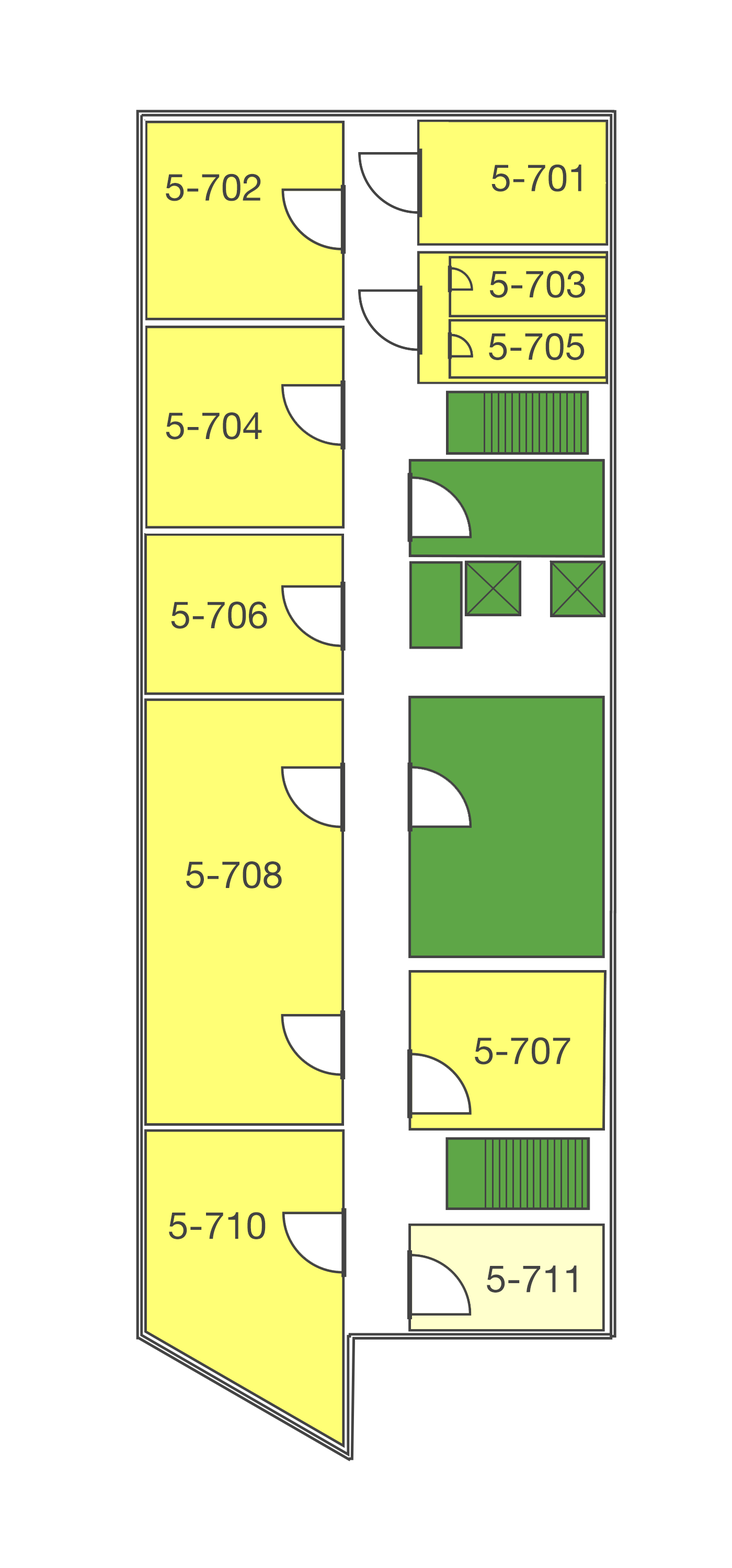
<style>
.page{position:relative;width:732px;height:1568px;background:#ffffff}
.page>*{position:absolute;margin:0}
.t1{font:37.6px "HelveticaNeue";color:#434343}
</style>
<div class="page">
<p class="t1" style="left:166px;top:174px;width:95px;height:27px">5-702</p>
<p class="t1" style="left:491px;top:164px;width:90px;height:28px">5-701</p>
<p class="t1" style="left:490px;top:271px;width:95px;height:27px">5-703</p>
<p class="t1" style="left:489px;top:333px;width:95px;height:27px">5-705</p>
<p class="t1" style="left:166px;top:412px;width:96px;height:28px">5-704</p>
<p class="t1" style="left:171px;top:602px;width:96px;height:27px">5-706</p>
<p class="t1" style="left:186px;top:861px;width:96px;height:28px">5-708</p>
<p class="t1" style="left:475px;top:1037px;width:95px;height:28px">5-707</p>
<p class="t1" style="left:169px;top:1212px;width:97px;height:27px">5-710</p>
<p class="t1" style="left:487px;top:1265px;width:90px;height:28px">5-711</p>
</div>
